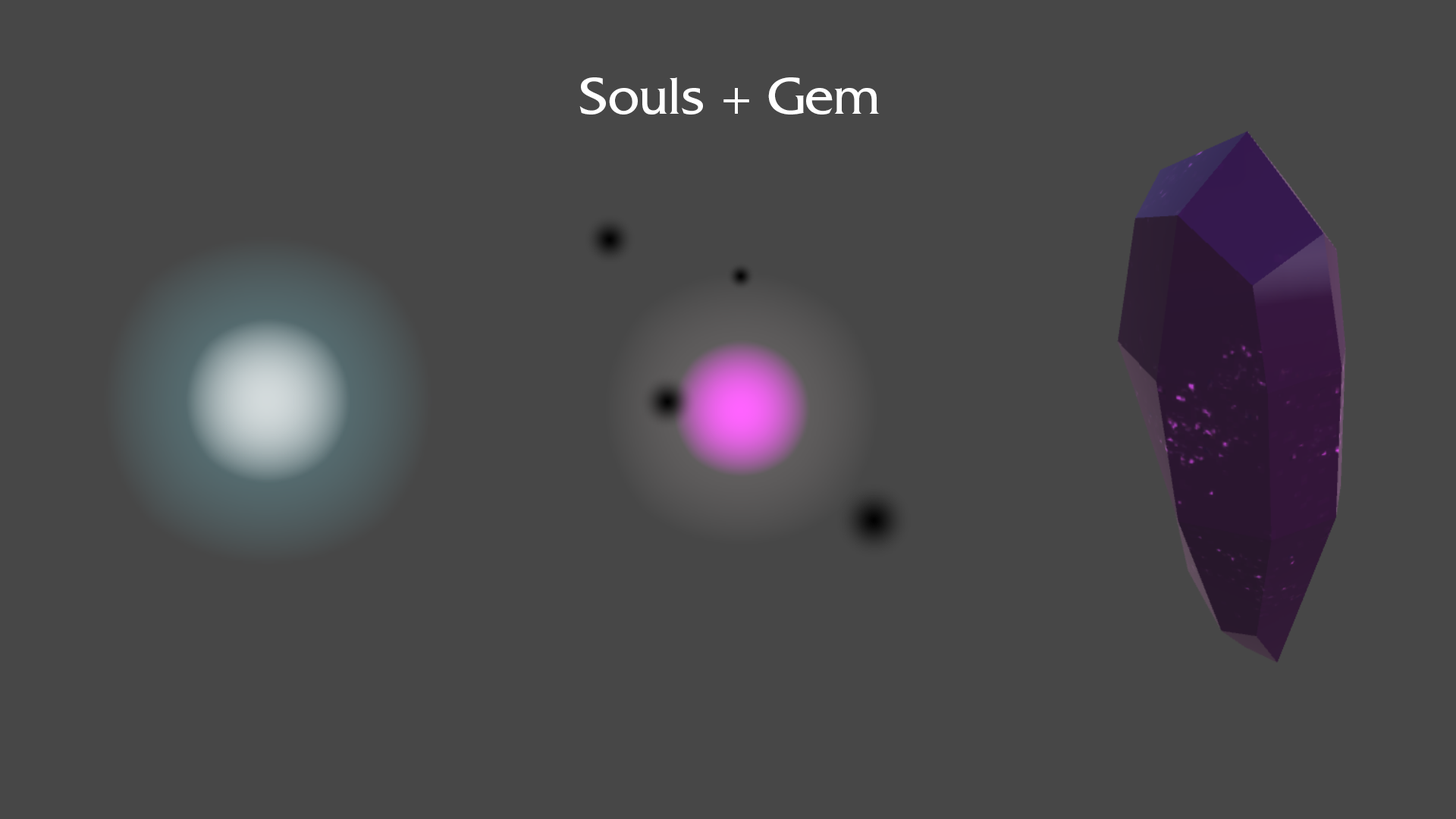
<style>
.page{position:relative;width:1456px;height:819px;background:#474747}
.page>*{position:absolute;margin:0}
.t1{font:54.6px "FrizQuadrataStd";color:#ffffff}
</style>
<div class="page">
<p class="t1" style="left:579px;top:77px;width:301px;height:38px">Souls + Gem</p>
</div>
